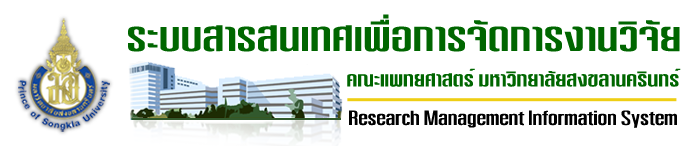
<style>
.page{position:relative;width:700px;height:146px;background:#ffffff}
.page>*{position:absolute;margin:0}
.t1{font:42px "DSNPatPongExtend";color:#006600}
.t2{font:21px "DSNPatPongExtend";color:#006600}
.t3{font:19px "DSNPatPongExtend";color:#000000}
</style>
<div class="page">
<p class="t1" style="left:128px;top:14px;width:552px;height:38px">ระบบสารสนเทศเพื่อการจัดการงานวิจัย</p>
<p class="t2" style="left:347px;top:68px;width:334px;height:19px">คณะแพทยศาสตร์ มหาวิทยาลัยสงขลานครินทร์</p>
<p class="t3" style="left:349px;top:110px;width:328px;height:18px">Research Management Information System</p>
</div>
